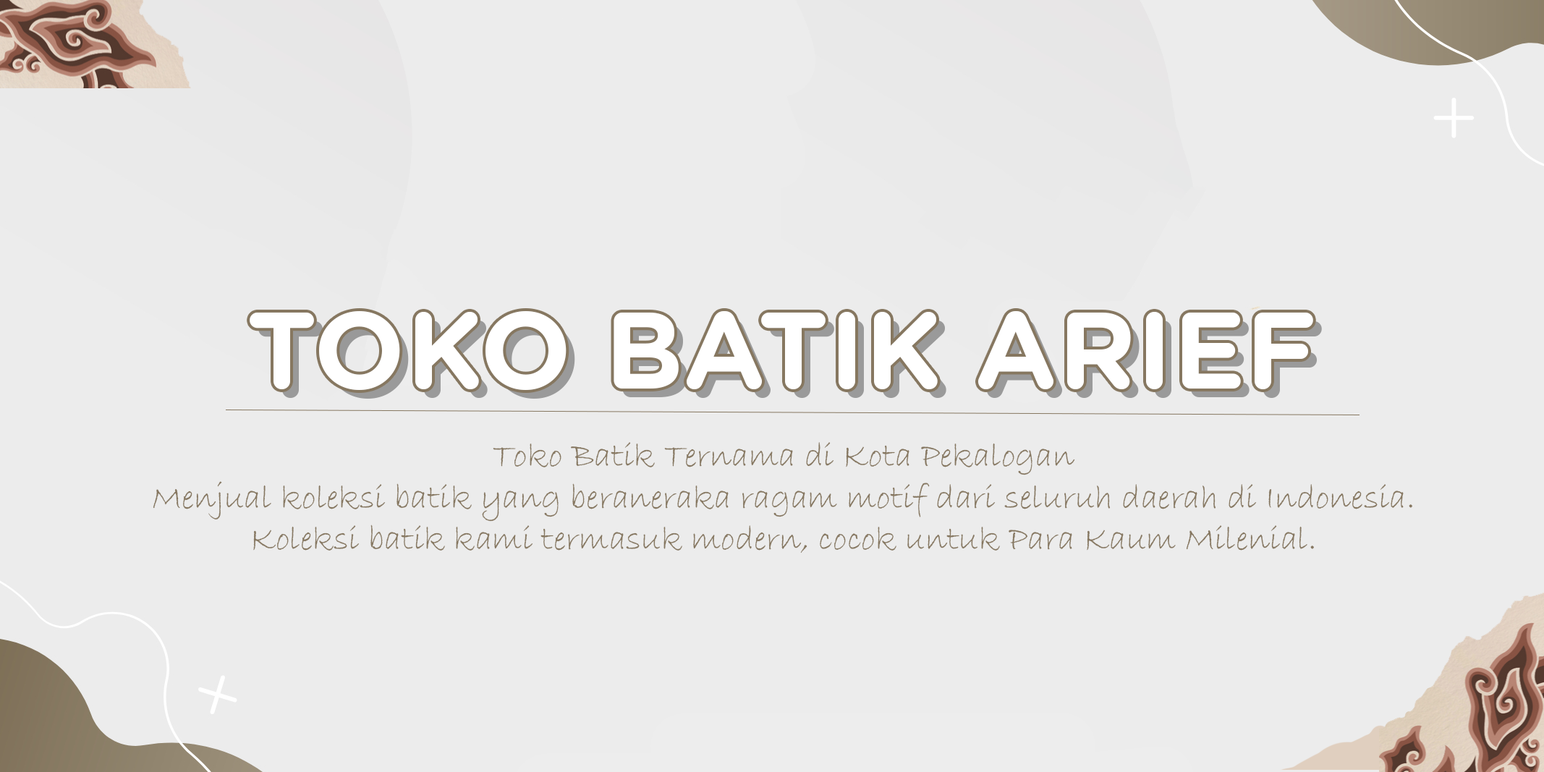
<style>
.page{position:relative;width:1544px;height:772px;background:#ececec}
.page>*{position:absolute;margin:0}
.t1{font:108.5px "GothamRounded-Bold";color:#ffffff}
.t2{font:34.7px "BradleyHandITC";color:#867760}
</style>
<div class="page">
<p class="t1" style="left:250px;top:311px;width:1063px;height:79px">TOKO BATIK ARIEF</p>
<p class="t2" style="left:153px;top:442px;width:1260px;height:111px;text-align:center">Toko Batik Ternama di Kota Pekalogan<br>Menjual koleksi batik yang beraneraka ragam motif dari seluruh daerah di Indonesia.<br>Koleksi batik kami termasuk modern, cocok untuk Para Kaum Milenial.</p>
</div>
